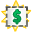
<style>
.page{position:relative;width:32px;height:32px;background:#ffffff}
.page>*{position:absolute;margin:0}
.t1{font:15.7px "MyriadPro-Regular";color:#03b257;font-weight:bold}
</style>
<div class="page">
<p class="t1" style="left:13px;top:10px;width:8px;height:14px">$</p>
</div>
